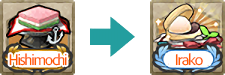
<style>
.page{position:relative;width:225px;height:75px;background:#ffffff}
.page>*{position:absolute;margin:0}
.t1{font:16px "AdobeClean-SemiCn";letter-spacing:-0.08em;color:#ff5a00}
.t2{font:16px "AdobeClean-Regular";letter-spacing:-0.08em;color:#ff5a00}
</style>
<div class="page">
<p class="t1" style="left:9px;top:53px;width:58px;height:13px">Hishimochi</p>
<p class="t2" style="left:175px;top:53px;width:28px;height:13px">Irako</p>
</div>
